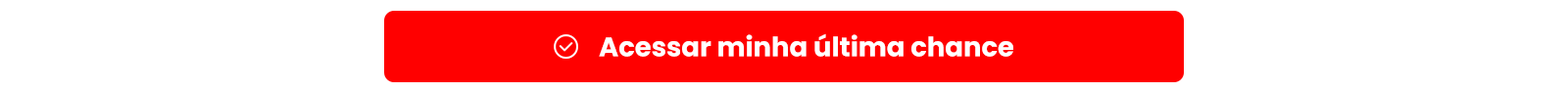
<style>
.page{position:relative;width:1568px;height:93px;background:#ffffff}
.page>*{position:absolute;margin:0}
.t1{font:26.9px "Poppins-Bold";color:#ffffff}
</style>
<div class="page">
<p class="t1" style="left:599px;top:33px;width:414px;height:24px">Acessar minha última chance</p>
</div>
